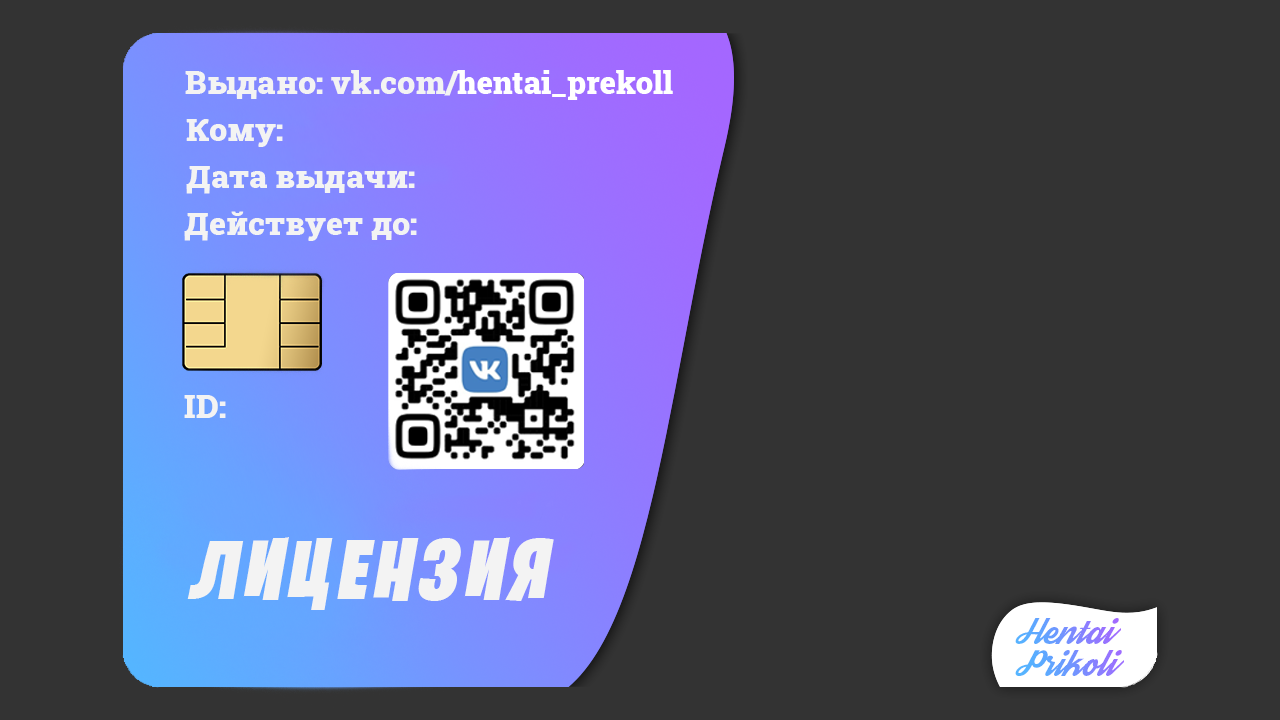
<style>
.page{position:relative;width:1280px;height:720px;background:#333333}
.page>*{position:absolute;margin:0}
.t1{font:32px "RobotoSlab-Black";color:#f3f3f3}
.t2{font:31px "RobotoSlab-Black";color:#ffffff}
.t3{font:85px "FORTNITEBATTLEFEST";letter-spacing:0.075em;color:#f3f3f3;font-style:italic}
.t4{font:26px "Streetwear"}
</style>
<div class="page">
<p class="t1" style="left:185px;top:70px;width:488px;height:30px">Выдано: vk.com/<span class="t2">hentai_prekoll</span></p>
<p class="t1" style="left:186px;top:119px;width:97px;height:28px">Кому:</p>
<p class="t1" style="left:186px;top:166px;width:229px;height:28px">Дата выдачи:</p>
<p class="t1" style="left:184px;top:211px;width:233px;height:30px">Действует до:</p>
<p class="t1" style="left:184px;top:395px;width:42px;height:23px">ID:</p>
<p class="t3" style="left:187px;top:537px;width:367px;height:73px">ЛИЦЕНЗИЯ</p>
<p class="t4" style="left:1015px;top:618px;width:109px;height:58px">Hentai<br>Prikoli</p>
</div>
